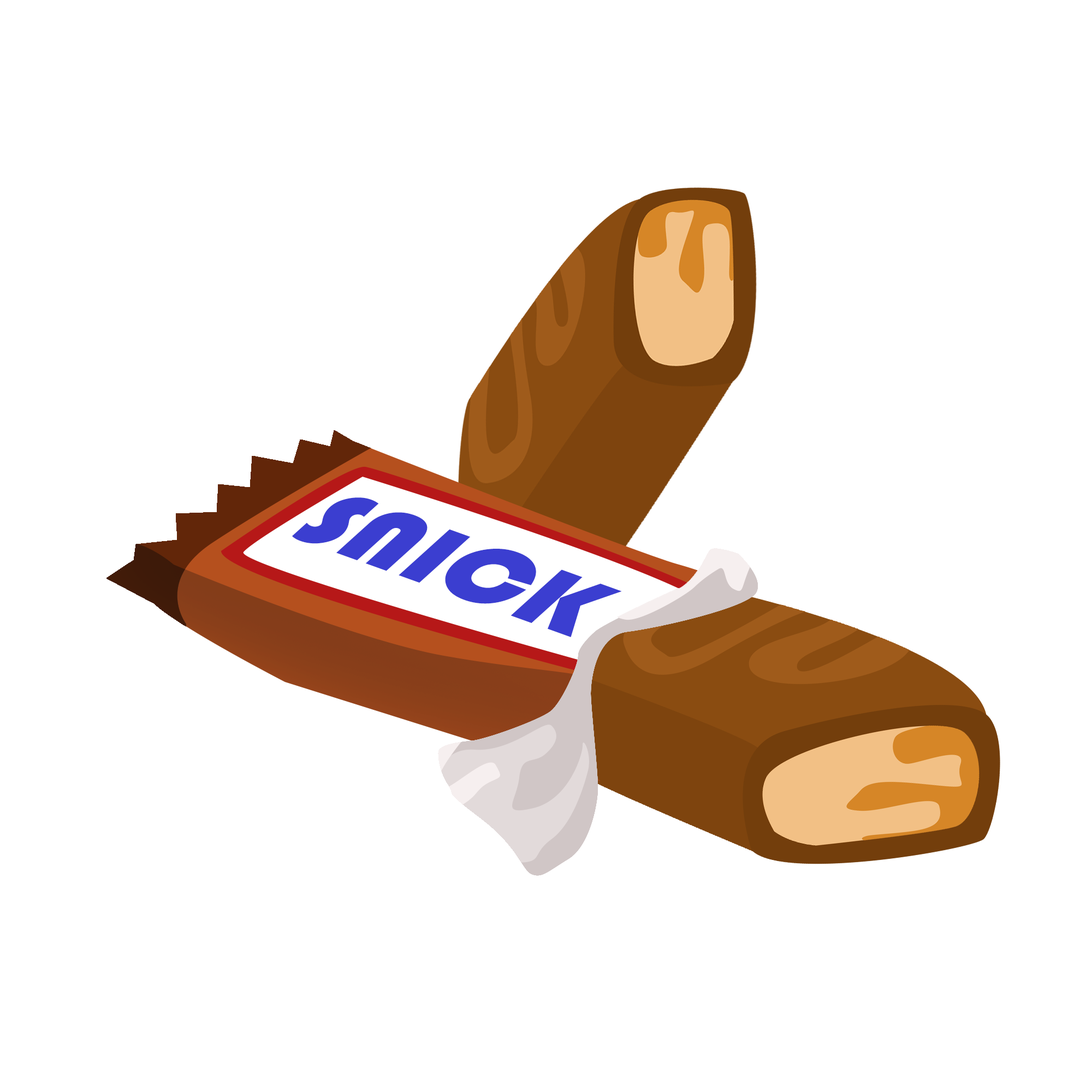
<style>
.page{position:relative;width:1092px;height:1092px;background:#ffffff}
.page>*{position:absolute;margin:0}
.t1{font:102.4px "STHupo";color:#3b3ed0;scale:1.07 1}
</style>
<div class="page">
<p class="t1" style="left:292px;top:497px;width:330px;height:140px;rotate:20deg">SNICK</p>
</div>
